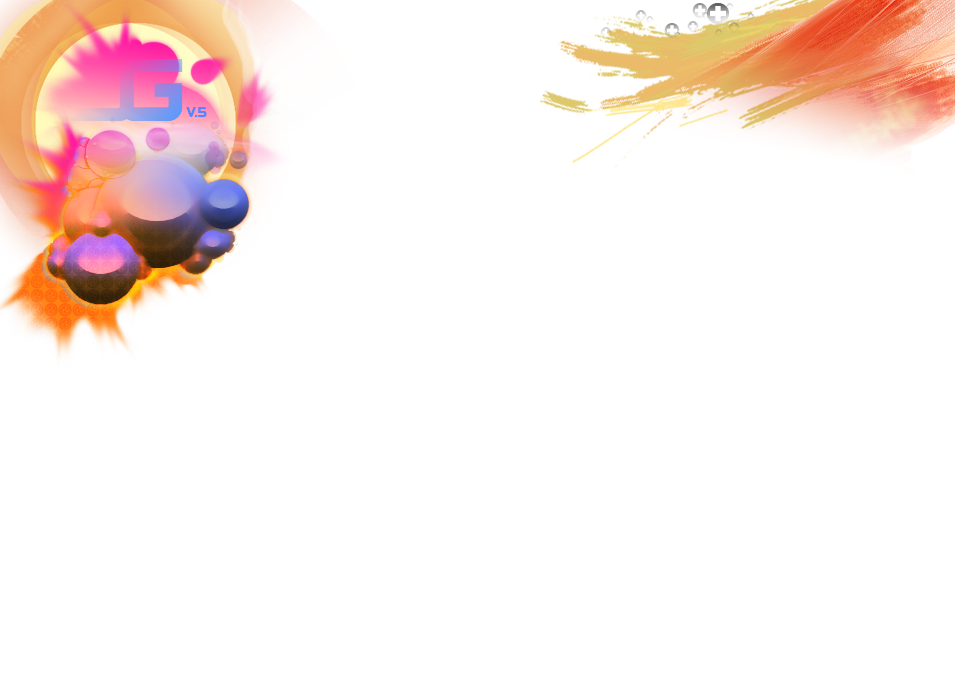
<style>
.page{position:relative;width:955px;height:700px;background:#ffffff}
.page>*{position:absolute;margin:0}
.t1{font:36px "Carta";letter-spacing:0.05em}
.t2{font:12px "BoomBox";letter-spacing:0.05em;color:#5484ff}
</style>
<div class="page">
<p class="t1" style="left:707px;top:3px;width:22px;height:21px">x</p>
<p class="t2" style="left:186px;top:107px;width:21px;height:10px">v.5</p>
</div>
